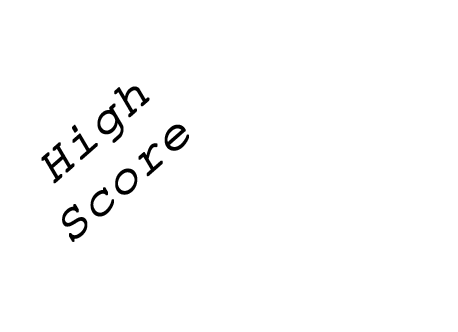
<style>
.page{position:relative;width:458px;height:332px;background:#ffffff}
.page>*{position:absolute;margin:0}
.t1{font:47.5px "CourierNewPSMT";color:#000000;font-weight:bold;scale:1.11 1}
</style>
<div class="page">
<p class="t1" style="left:41px;top:86px;width:148px;height:156px;text-align:center;rotate:-41deg">High<br>Score</p>
</div>
